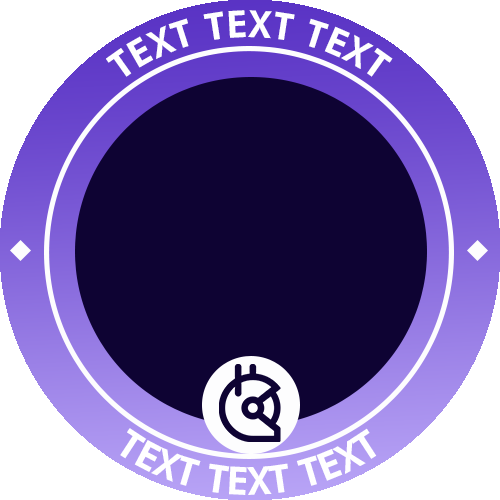
<style>
.page{position:relative;width:500px;height:500px;background:#0e0333}
.page>*{position:absolute;margin:0}
.t1{font:37.5px "FuturaBT-Heavy";color:#ffffff}
.t2{font:38.9px "FuturaBT-Heavy";color:#ffffff}
</style>
<div class="page">
<p class="t1" style="left:106px;top:10px;width:287px;height:67px;text-align:center">TEXT TEXT TEXT</p>
<p class="t2" style="left:120px;top:428px;width:257px;height:67px;text-align:center">TEXT TEXT TEXT</p>
</div>
